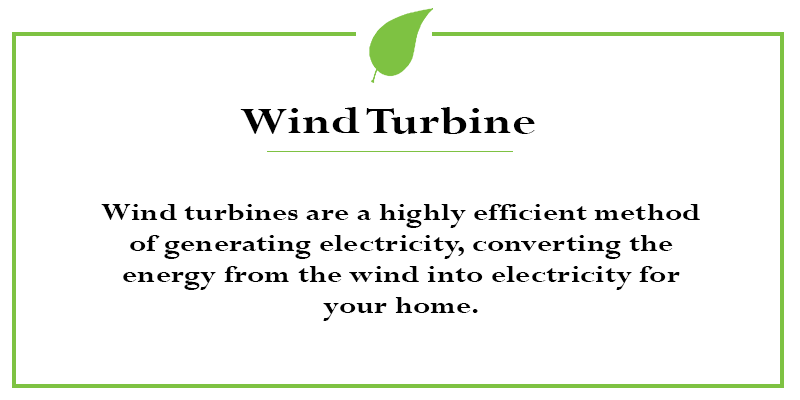
<style>
.page{position:relative;width:800px;height:400px;background:#ffffff}
.page>*{position:absolute;margin:0}
.t1{font:40.8px "Perpetua-Bold";color:#000000;scale:1.26 1}
.t2{font:25.6px "Perpetua-Bold";color:#000000;scale:1.26 1}
</style>
<div class="page">
<p class="t1" style="left:240px;top:107px;width:295px;height:27px">Wind Turbine</p>
<p class="t2" style="left:101px;top:204px;width:599px;height:117px;text-align:center">Wind turbines are a highly efficient method of generating electricity, converting the energy from the wind into electricity for your home.</p>
</div>
